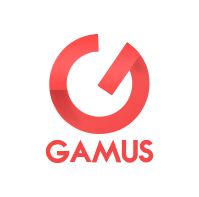
<style>
.page{position:relative;width:199px;height:197px;background:#ffffff}
.page>*{position:absolute;margin:0}
.t1{font:39px "NOVAegular";color:#f64747}
</style>
<div class="page">
<p class="t1" style="left:45px;top:139px;width:109px;height:24px">Gamus</p>
</div>
